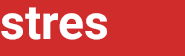
<style>
.page{position:relative;width:185px;height:56px;background:#d12c2c}
.page>*{position:absolute;margin:0}
.t1{font:48px "Roboto-Bold";color:#ffffff}
</style>
<div class="page">
<p class="t1" style="left:1px;top:7px;width:106px;height:33px">stres</p>
</div>
